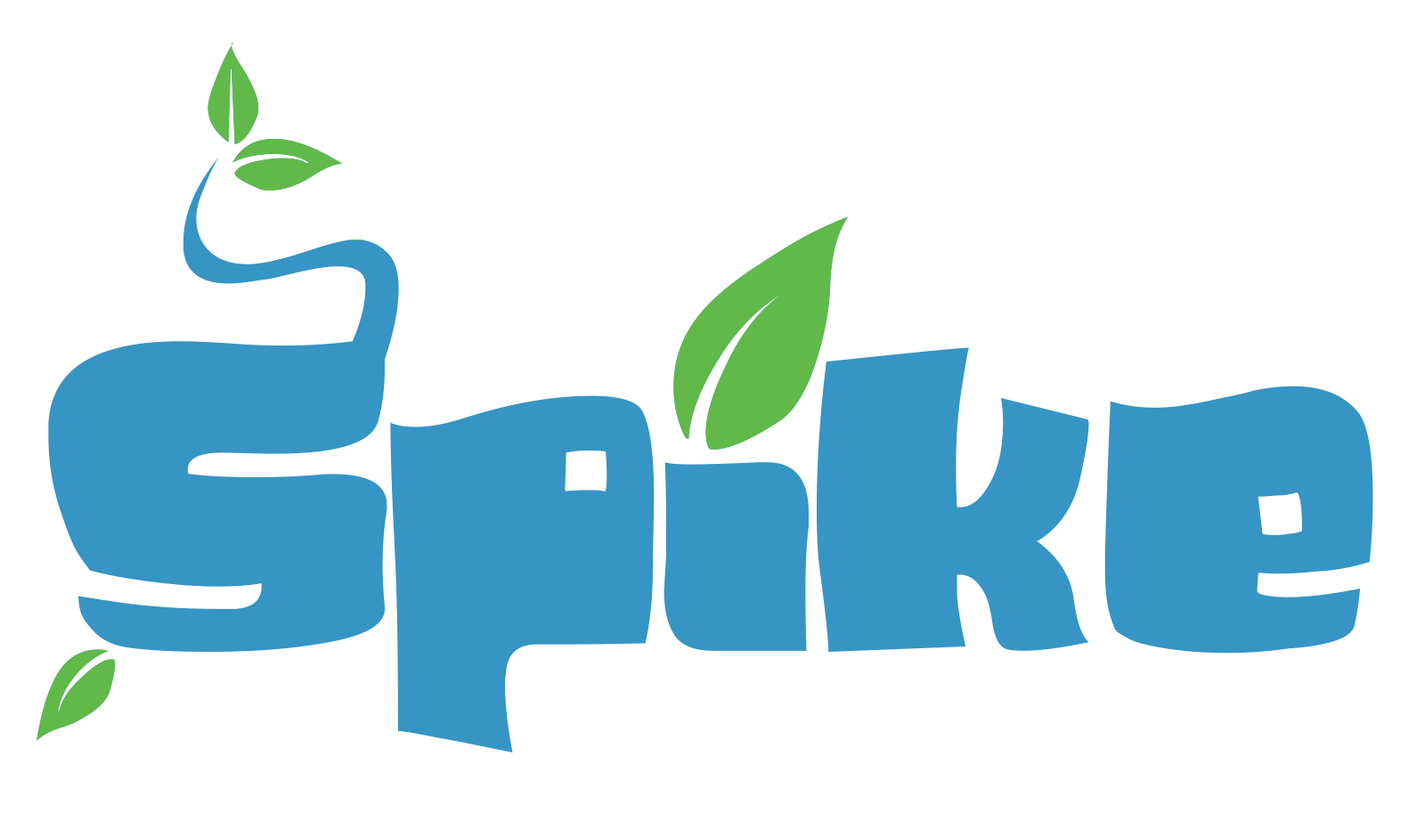
<style>
.page{position:relative;width:1425px;height:837px;background:#ffffff}
.page>*{position:absolute;margin:0}
.t1{font:428.4px "SoupLeaf";color:#3695c4}
</style>
<div class="page">
<p class="t1" style="left:37px;top:42px;width:1336px;height:711px">Spike</p>
</div>
